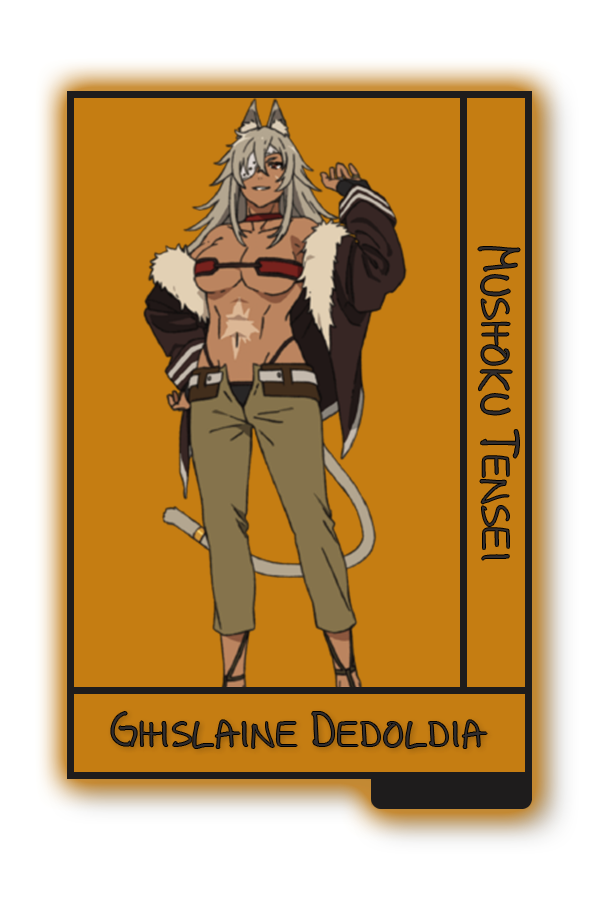
<style>
.page{position:relative;width:600px;height:900px;background:#c57d12}
.page>*{position:absolute;margin:0}
.t1{font:41px "AllCaps";color:#312d2d}
.t2{font:38.3px "AllCaps";color:#312d2d}
</style>
<div class="page">
<p class="t1" style="left:478px;top:247px;width:42px;height:313px;rotate:90deg">Mushoku Tensei</p>
<p class="t2" style="left:111px;top:712px;width:376px;height:36px">Ghislaine Dedoldia</p>
</div>
